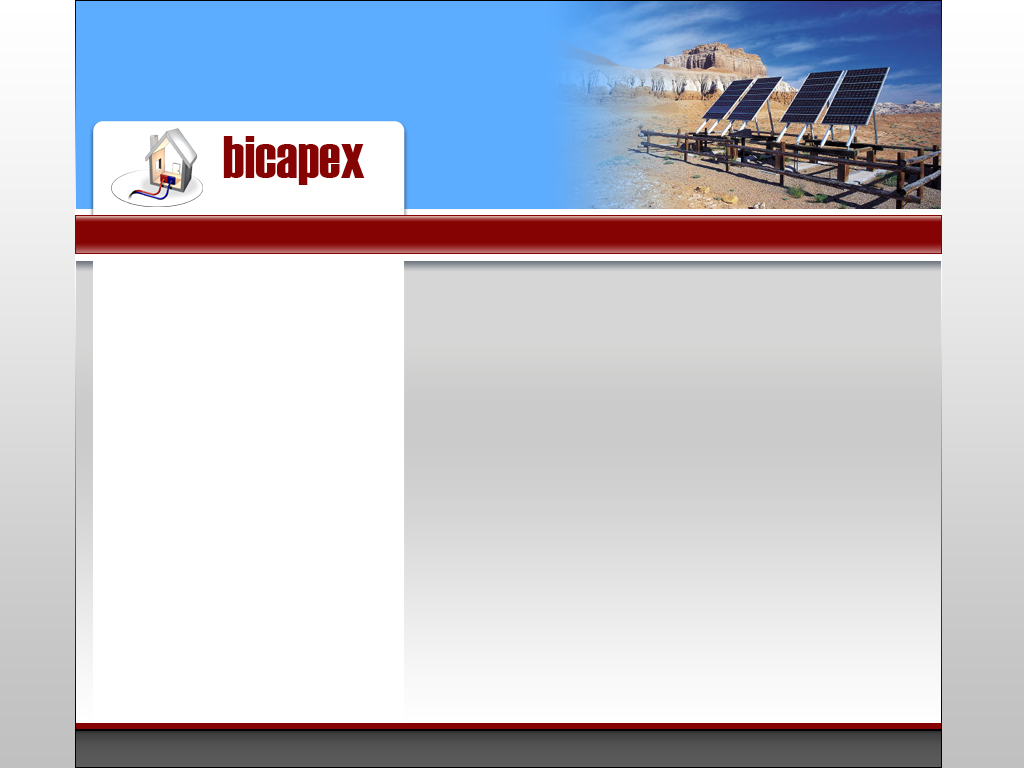
<style>
.page{position:relative;width:1024px;height:768px;background:#ffffff}
.page>*{position:absolute;margin:0}
.t1{font:60px "Haettenschweiler";color:#860303}
</style>
<div class="page">
<p class="t1" style="left:223px;top:136px;width:142px;height:49px">bicapex</p>
</div>
